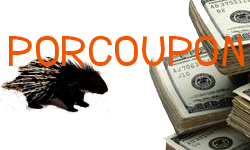
<style>
.page{position:relative;width:250px;height:150px;background:#ffffff}
.page>*{position:absolute;margin:0}
.t1{font:38px "TPFRubberDucky";color:#f15503}
</style>
<div class="page">
<p class="t1" style="left:9px;top:36px;width:236px;height:30px">PORCOUPON</p>
</div>
